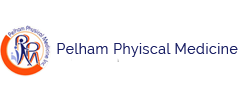
<style>
.page{position:relative;width:242px;height:100px;background:#ffffff}
.page>*{position:absolute;margin:0}
.t1{font:14px "Raleway";letter-spacing:0.04em;color:#191e64}
</style>
<div class="page">
<p class="t1" style="left:57px;top:43px;width:181px;height:14px">Pelham Phyiscal Medicine</p>
</div>
